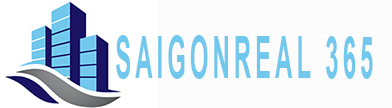
<style>
.page{position:relative;width:392px;height:108px;background:#fcfcfc}
.page>*{position:absolute;margin:0}
.t1{font:58.4px "Arial-BoldMT";letter-spacing:0.17em;color:#72c8ec;scale:0.41 1}
</style>
<div class="page">
<p class="t1" style="left:116px;top:35px;width:257px;height:44px">SAIGONREAL 365</p>
</div>
